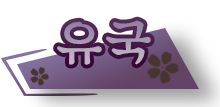
<style>
.page{position:relative;width:220px;height:107px;background:#ffffff}
.page>*{position:absolute;margin:0}
.t1{font:50.6px "SDKukdetopokki-aLt";letter-spacing:0.06em}
</style>
<div class="page">
<p class="t1" style="left:57px;top:20px;width:94px;height:45px">유국</p>
</div>
